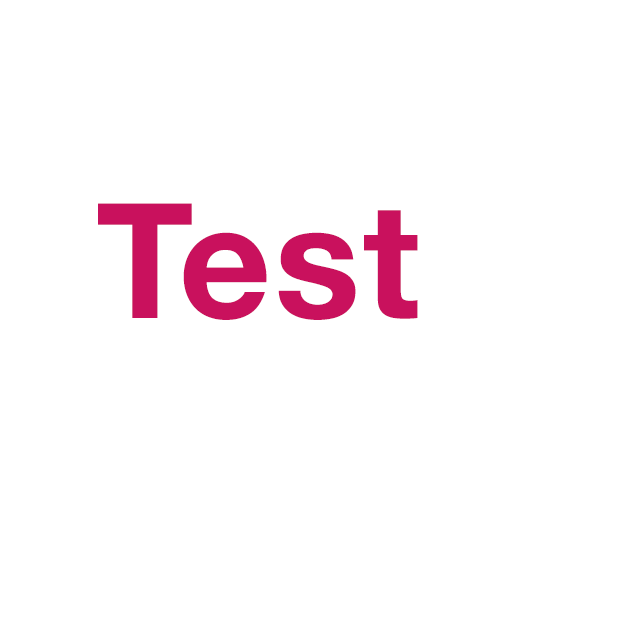
<style>
.page{position:relative;width:640px;height:640px;background:#ffffff}
.page>*{position:absolute;margin:0}
.t1{font:160px "HelveticaNeue-Bold";letter-spacing:0.02em;color:#c9115d}
</style>
<div class="page">
<p class="t1" style="left:98px;top:203px;width:320px;height:117px">Test</p>
</div>
